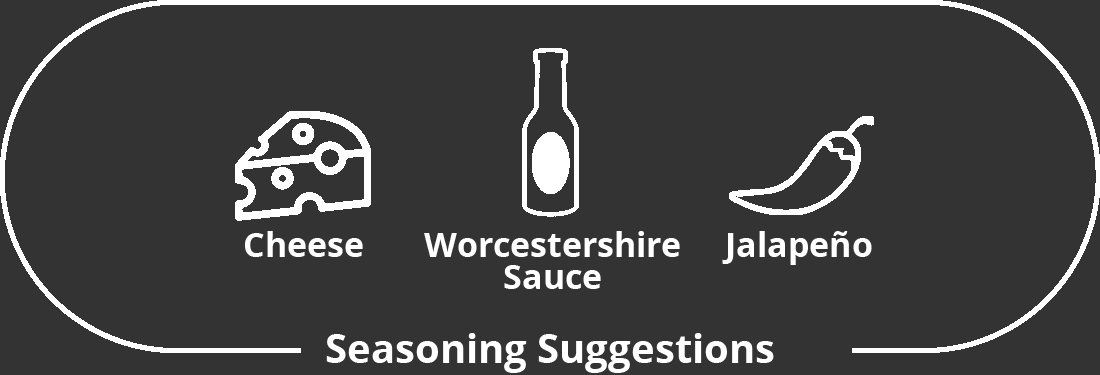
<style>
.page{position:relative;width:1100px;height:375px;background:#333333}
.page>*{position:absolute;margin:0}
.t1{font:34px "OpenSans-Bold";color:#ffffff}
.t2{font:34px/32px "OpenSans-Bold";color:#ffffff}
.t3{font:40px "OpenSans-Bold";color:#ffffff}
</style>
<div class="page">
<p class="t1" style="left:245px;top:231px;width:118px;height:26px">Cheese</p>
<p class="t2" style="left:424px;top:231px;width:256px;height:58px;text-align:center">Worcestershire<br>Sauce</p>
<p class="t1" style="left:722px;top:231px;width:150px;height:34px">Jalapeño</p>
<p class="t3" style="left:326px;top:333px;width:448px;height:40px">Seasoning Suggestions</p>
</div>
